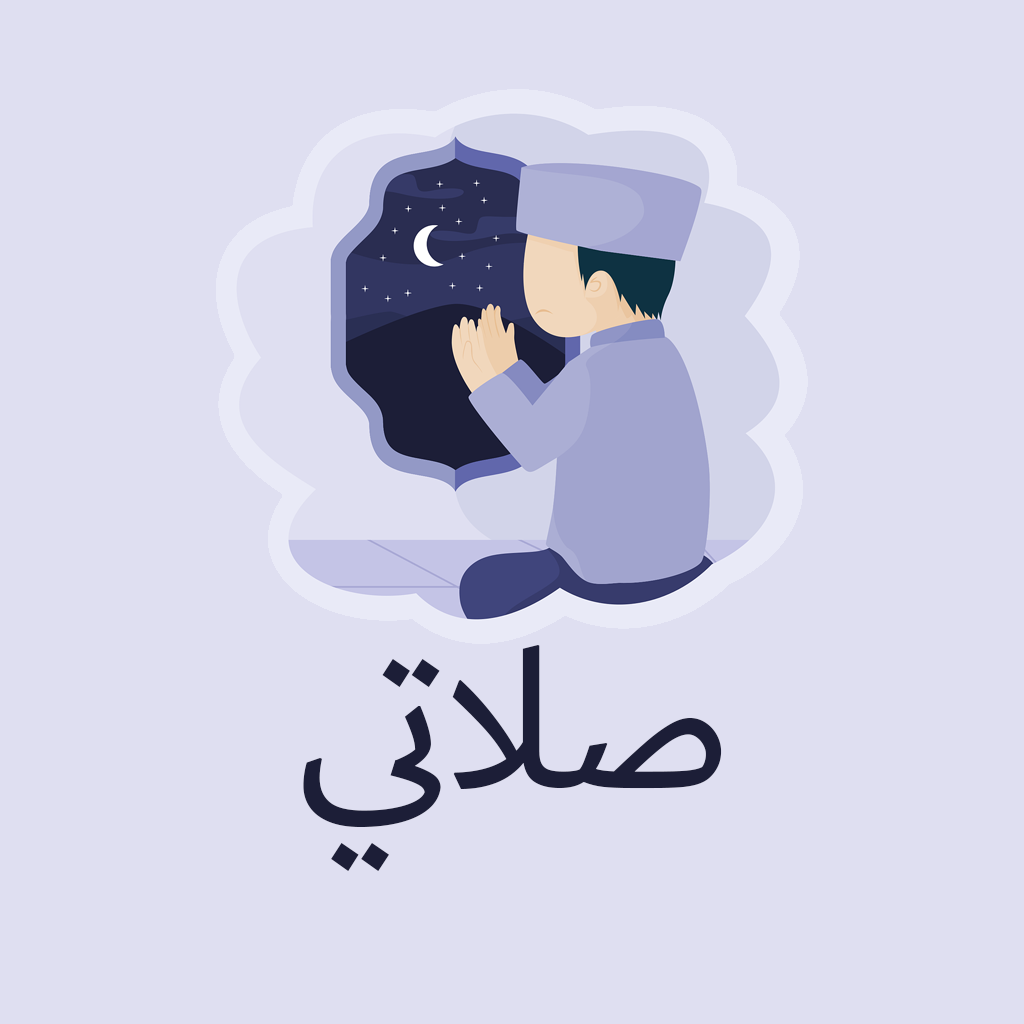
<style>
.page{position:relative;width:1024px;height:1024px;background:#dfdff1}
.page>*{position:absolute;margin:0}
.t1{font:209.8px "Dubai-Regular";color:#1c1e37}
</style>
<div class="page">
<p class="t1" style="left:303px;top:645px;width:419px;height:226px">صلاتي</p>
</div>
